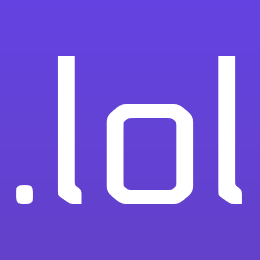
<style>
.page{position:relative;width:260px;height:260px}
.page>*{position:absolute;margin:0}
.t1{font:200px "Electrolize-Regular";color:#ffffff}
</style>
<div class="page">
<p class="t1" style="left:16px;top:56px;width:226px;height:148px">.lol</p>
</div>
